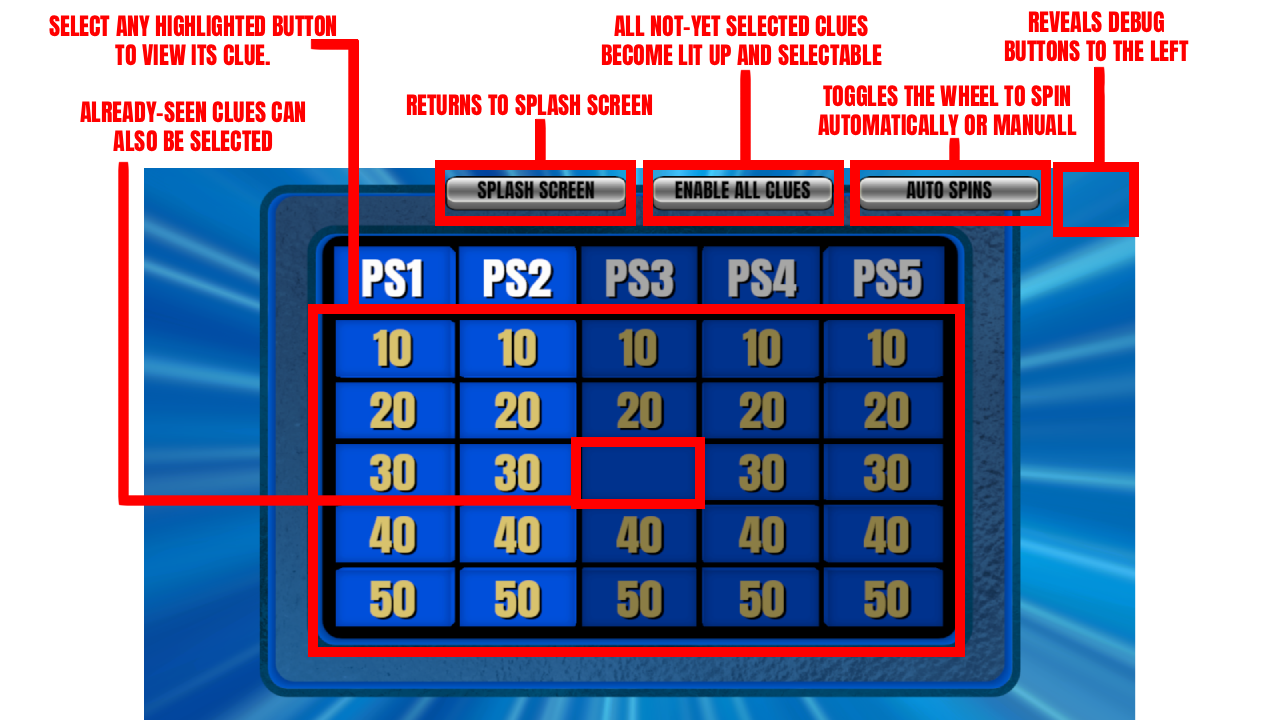
<style>
.page{position:relative;width:1280px;height:720px;background:#ffffff}
.page>*{position:absolute;margin:0}
.t1{font:24px "Anton-Regular";color:#ff0000}
</style>
<div class="page">
<p class="t1" style="left:49px;top:15px;width:288px;height:137px;text-align:center">SELECT ANY HIGHLIGHTED BUTTON<br>TO VIEW ITS CLUE.<br><br>ALREADY-SEEN CLUES CAN<br>ALSO BE SELECTED</p>
<p class="t1" style="left:601px;top:15px;width:281px;height:51px;text-align:center">ALL NOT-YET SELECTED CLUES<br>BECOME LIT UP AND SELECTABLE</p>
<p class="t1" style="left:1004px;top:11px;width:185px;height:51px;text-align:center">REVEALS DEBUG<br>BUTTONS TO THE LEFT</p>
<p class="t1" style="left:818px;top:85px;width:259px;height:51px;text-align:center">TOGGLES THE WHEEL TO SPIN<br>AUTOMATICALLY OR MANUALL</p>
<p class="t1" style="left:406px;top:94px;width:247px;height:22px">RETURNS TO SPLASH SCREEN</p>
</div>
